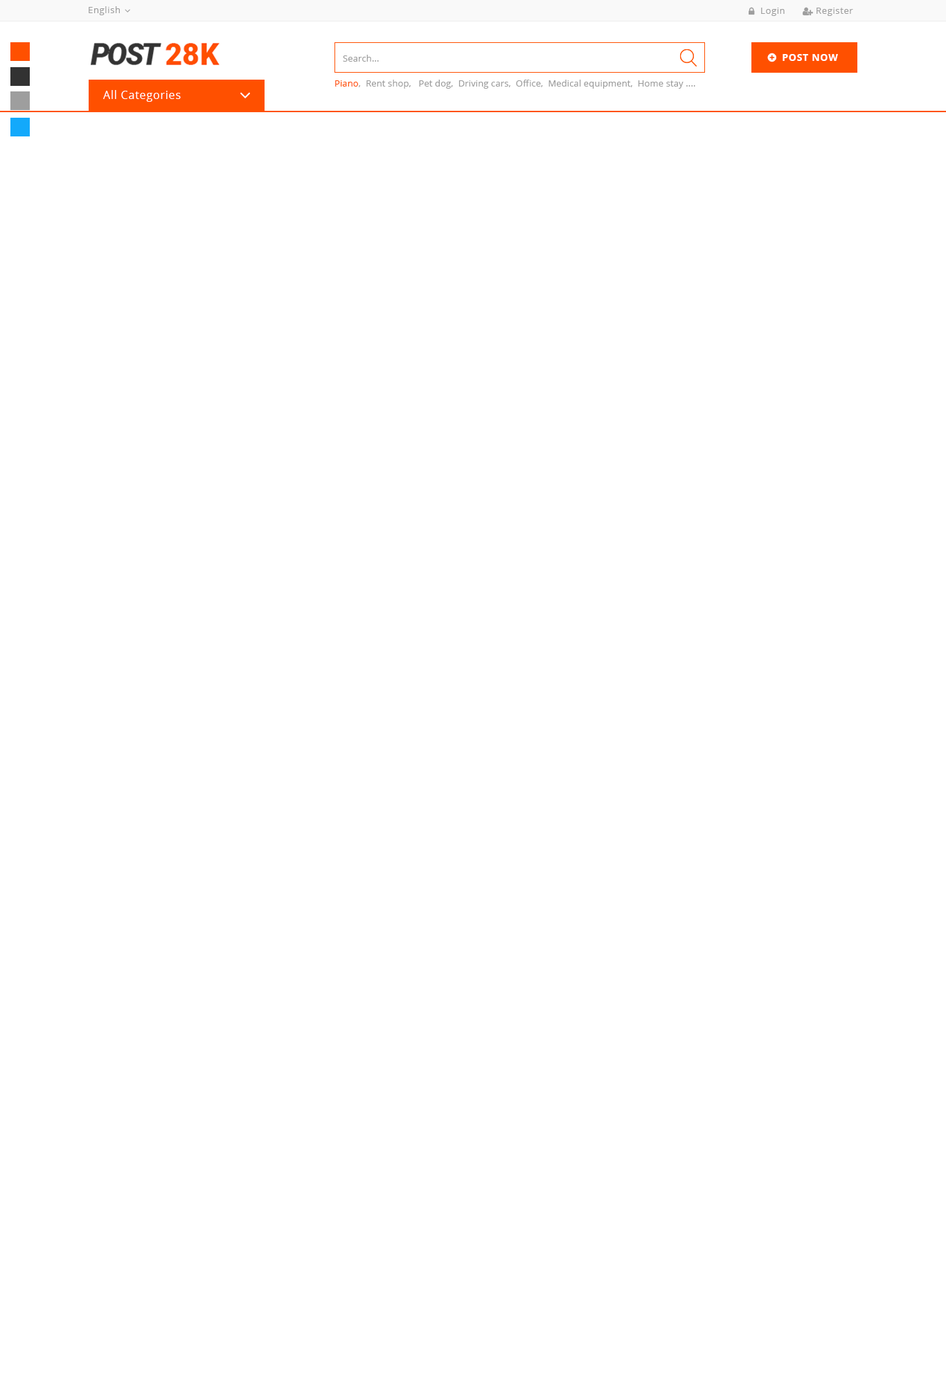
<style>
.page{position:relative;width:946px;height:1385px;background:#ffffff}
.page>*{position:absolute;margin:0}
.t1{font:9px "OpenSans-Regular";letter-spacing:0.05em;color:#9e9e9e}
.t2{font:9.7px "OpenSans-Bold";letter-spacing:0.05em;color:#ffffff}
.t3{font:9px "OpenSans-Regular";letter-spacing:0.01em;color:#9e9e9e}
.t4{font:9px "OpenSans-Regular";letter-spacing:0.01em;color:#ff5000}
.t5{font:11.1px "OpenSans-Regular";letter-spacing:0.05em;color:#ffffff}
</style>
<div class="page">
<p class="t1" style="left:89px;top:6px;width:31px;height:9px">English</p>
<p class="t1" style="left:761px;top:8px;width:23px;height:8px">Login</p>
<p class="t1" style="left:816px;top:8px;width:37px;height:8px">Register</p>
<p class="t2" style="left:782px;top:54px;width:56px;height:7px">POST NOW</p>
<p class="t3" style="left:343px;top:55px;width:36px;height:7px">Search...</p>
<p class="t3" style="left:335px;top:80px;width:360px;height:9px"><span class="t4">Piano</span>,  Rent shop,   Pet dog,  Driving cars,  Office,  Medical equipment,  Home stay ....</p>
<p class="t5" style="left:103px;top:90px;width:78px;height:12px">All Categories</p>
</div>
